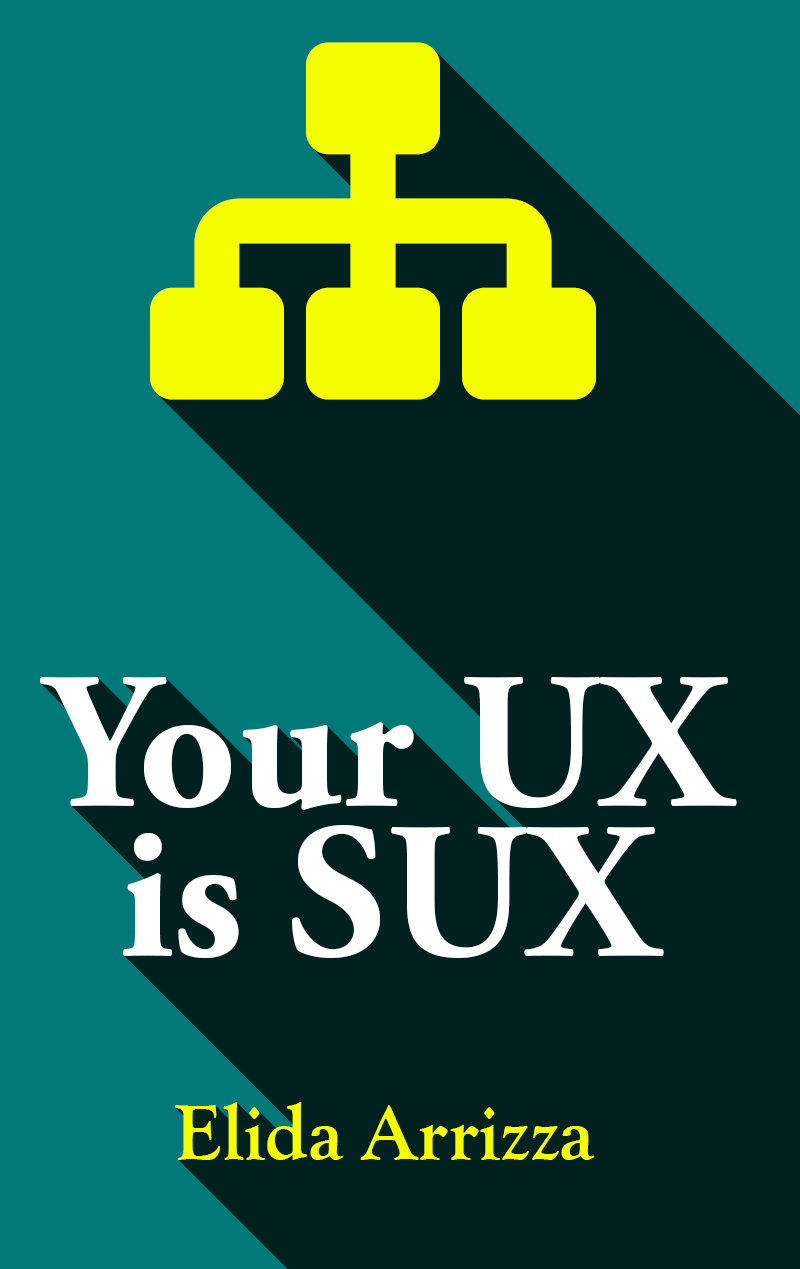
<style>
.page{position:relative;width:800px;height:1269px;background:#002120}
.page>*{position:absolute;margin:0}
.t1{font:192px/150px "AGaramondPro-Bold";color:#ffffff}
.t2{font:80px "GoudyOldStyleT-Bold";color:#f6ff00}
</style>
<div class="page">
<p class="t1" style="left:40px;top:677px;width:697px;height:281px;text-align:center">Your UX<br>is SUX</p>
<p class="t2" style="left:175px;top:1102px;width:420px;height:58px">Elida Arrizza</p>
</div>
